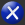
<style>
.page{position:relative;width:25px;height:25px;background:#333333}
.page>*{position:absolute;margin:0}
.t1{font:24px "ComicSansMS";color:#ffffff}
</style>
<div class="page">
<p class="t1" style="left:6px;top:6px;width:13px;height:14px">x</p>
</div>
